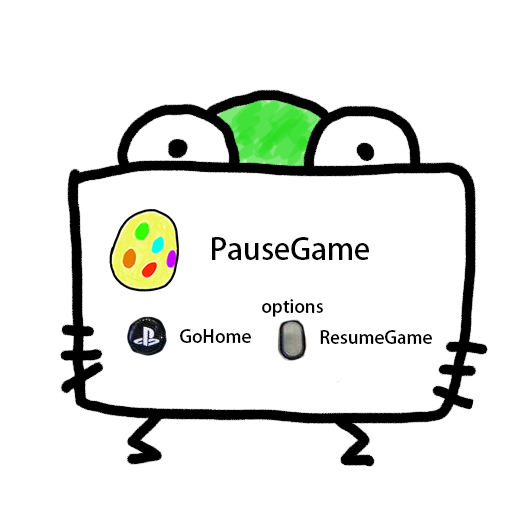
<style>
.page{position:relative;width:512px;height:512px;background:#ffffff}
.page>*{position:absolute;margin:0}
.t1{font:30px "AdobeHeitiStd-Regular";color:#000000}
.t2{font:18px "AdobeHeitiStd-Regular";color:#000000}
</style>
<div class="page">
<p class="t1" style="left:212px;top:237px;width:157px;height:23px">PauseGame</p>
<p class="t2" style="left:262px;top:299px;width:61px;height:18px">options</p>
<p class="t2" style="left:180px;top:329px;width:71px;height:14px">GoHome</p>
<p class="t2" style="left:320px;top:330px;width:112px;height:14px">ResumeGame</p>
</div>
